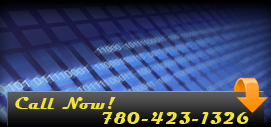
<style>
.page{position:relative;width:271px;height:127px}
.page>*{position:absolute;margin:0}
.t1{font:18px "Magneto-Bold";letter-spacing:0.025em;color:#f0e338}
</style>
<div class="page">
<p class="t1" style="left:15px;top:97px;width:101px;height:12px">Call Now!</p>
<p class="t1" style="left:102px;top:112px;width:147px;height:12px">780-423-1326</p>
</div>
